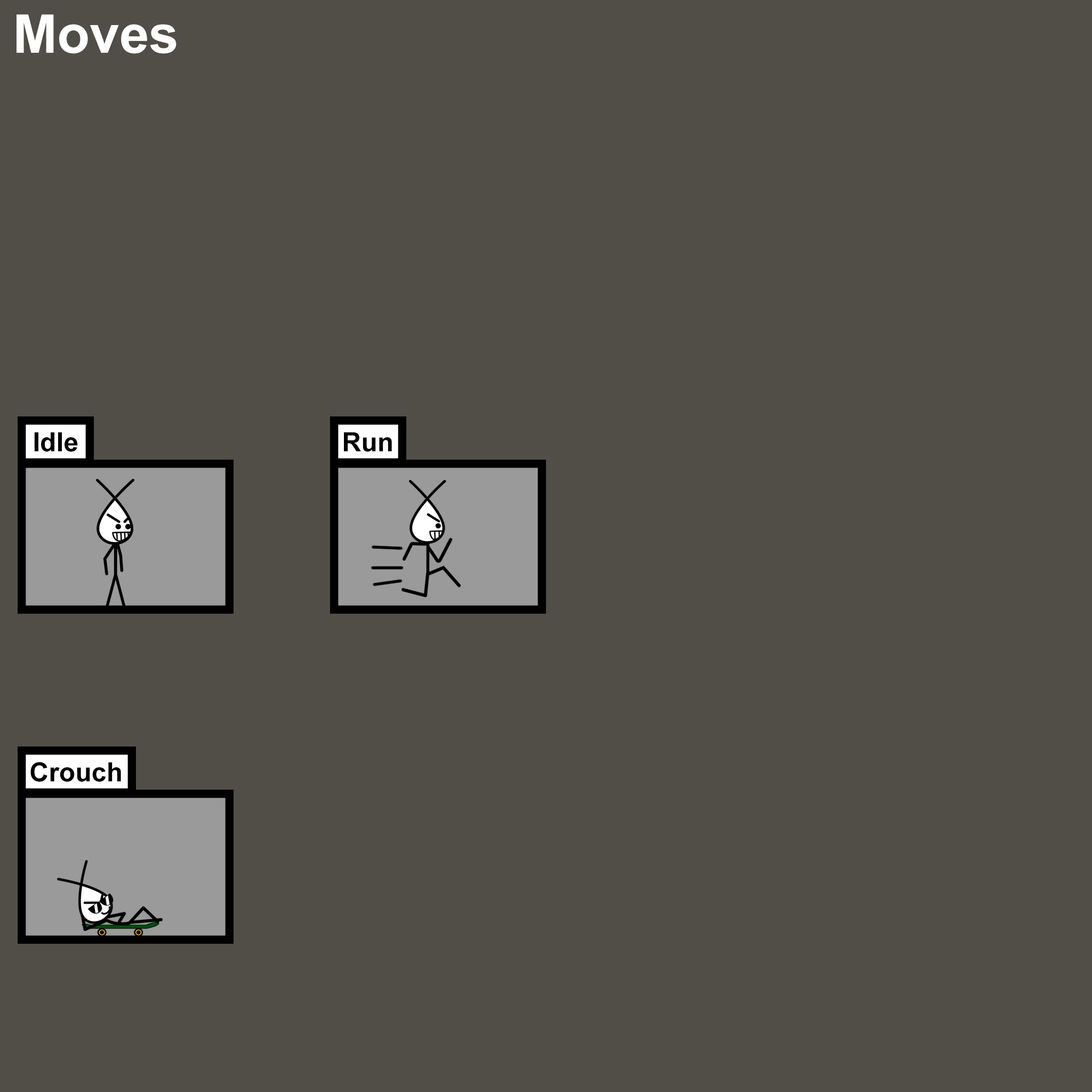
<style>
.page{position:relative;width:1092px;height:1092px;background:#514e48}
.page>*{position:absolute;margin:0}
.t1{font:53.3px "Arial-BoldMT";color:#ffffff}
.t2{font:26.7px "Arial-BoldMT";color:#000000}
</style>
<div class="page">
<p class="t1" style="left:17px;top:14px;width:159px;height:40px">Moves</p>
<p class="t2" style="left:34px;top:432px;width:44px;height:20px">Idle</p>
<p class="t2" style="left:344px;top:432px;width:48px;height:20px">Run</p>
<p class="t2" style="left:30px;top:762px;width:91px;height:20px">Crouch</p>
</div>
